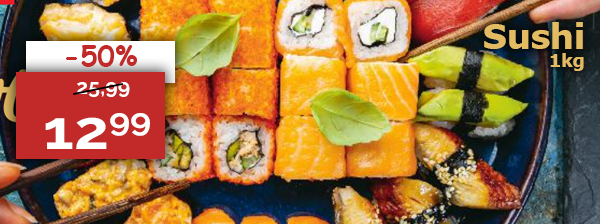
<style>
.page{position:relative;width:600px;height:224px}
.page>*{position:absolute;margin:0}
.t1{font:35px/18px "Tahoma-Bold";color:#e3bb63;scale:1.06 1}
.t2{font:18px/18px "Tahoma-Bold";color:#e3bb63;scale:1.06 1}
.t3{font:27.9px "ComicSansMS-Bold";color:#c12a29}
.t4{font:21.4px "Raleway-Bold";color:#ffffff}
.t5{font:54.1px "Raleway-Bold";color:#ffffff;scale:1.14 1}
</style>
<div class="page">
<p class="t1" style="left:484px;top:22px;width:100px;height:49px;text-align:right">Sushi<br><span class="t2">1kg</span></p>
<p class="t3" style="left:66px;top:45px;width:71px;height:22px">-50%</p>
<p class="t4" style="left:77px;top:82px;width:53px;height:15px">25,99</p>
<p class="t5" style="left:45px;top:113px;width:105px;height:36px">1299</p>
</div>
